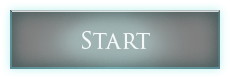
<style>
.page{position:relative;width:230px;height:79px}
.page>*{position:absolute;margin:0}
.t1{font:24px "TrajanPro3-Regular";color:#f1f1f1}
</style>
<div class="page">
<p class="t1" style="left:82px;top:31px;width:68px;height:18px">Start</p>
</div>
